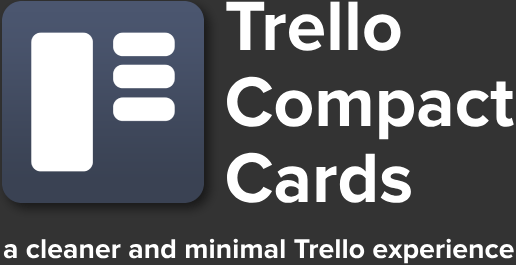
<style>
.page{position:relative;width:516px;height:265px;background:#333333}
.page>*{position:absolute;margin:0}
.t1{font:72.5px/75.8px "ProximaNova-Bold";color:#ffffff}
.t2{font:28.2px "ProximaNova-Bold";color:#ffffff}
</style>
<div class="page">
<p class="t1" style="left:226px;top:1px;width:288px;height:202px">Trello<br>Compact<br>Cards</p>
<p class="t2" style="left:3px;top:238px;width:511px;height:26px">a cleaner and minimal Trello experience</p>
</div>
